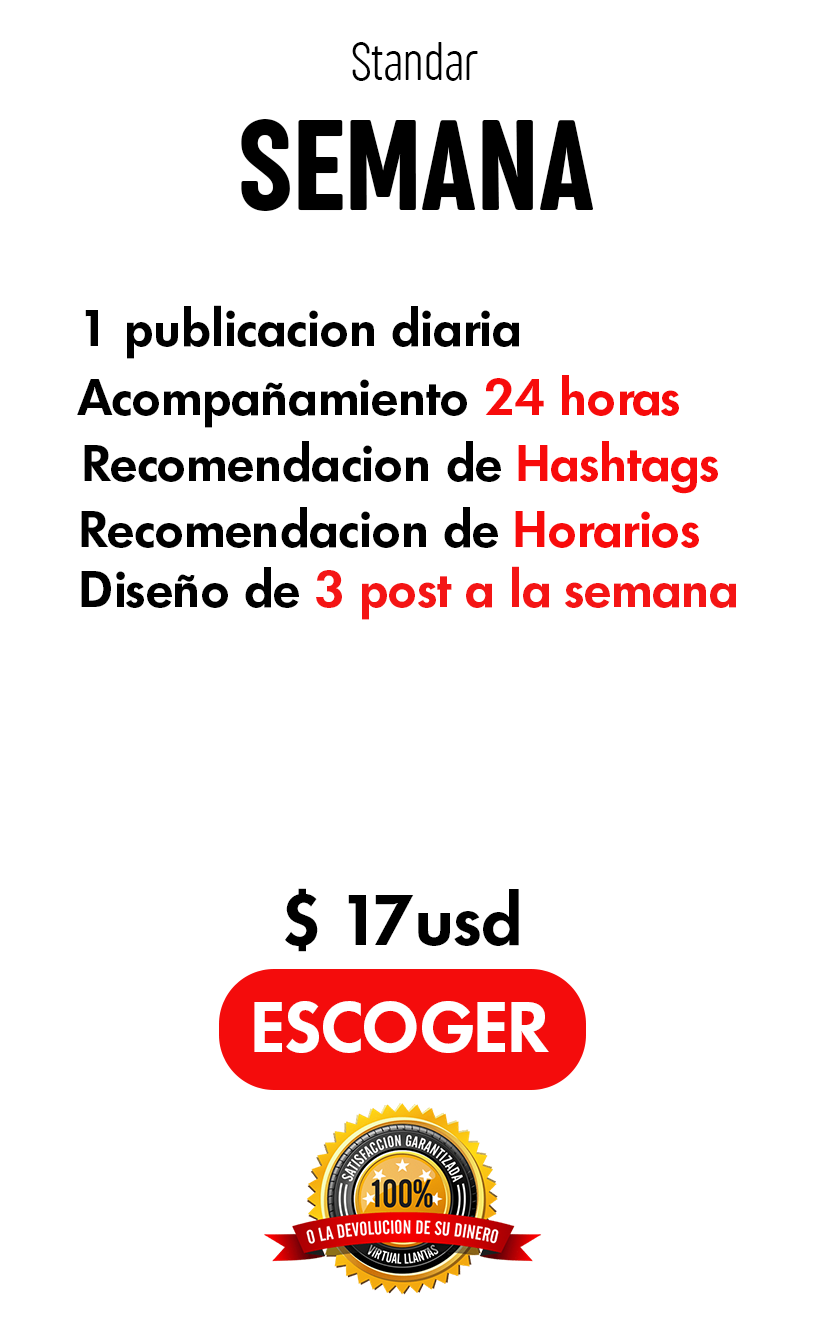
<style>
.page{position:relative;width:830px;height:1328px;background:#ffffff}
.page>*{position:absolute;margin:0}
.t1{font:55.6px "SugoProClassicTrial-ExtraLight";letter-spacing:0.004em;color:#000000}
.t2{font:133.2px "SugoProClassicTrial-Regular";letter-spacing:0.004em;color:#000000}
.t3{font:49.3px "Limerick-DemiBold";letter-spacing:0.004em;color:#000000}
.t4{font:49.3px "Limerick-DemiBold";letter-spacing:0.004em;color:#f70b0b}
.t5{font:49.3px "Limerick-DemiBold";letter-spacing:0.004em;color:#f80b0b}
.t6{font:49.3px "Limerick-DemiBold";letter-spacing:0.004em;color:#f41515}
.t7{font:68.7px "Limerick-DemiBold";letter-spacing:0.004em;color:#000000}
.t8{font:69.4px "Limerick-DemiBold";letter-spacing:0.004em;color:#ffffff}
</style>
<div class="page">
<p class="t1" style="left:352px;top:42px;width:126px;height:39px">Standar</p>
<p class="t2" style="left:241px;top:119px;width:353px;height:92px">SEMANA</p>
<p class="t3" style="left:85px;top:305px;width:434px;height:54px">1 publicacion diaria</p>
<p class="t3" style="left:77px;top:375px;width:602px;height:53px">Acompañamiento <span class="t4">24 horas</span></p>
<p class="t3" style="left:84px;top:441px;width:634px;height:53px">Recomendacion de <span class="t5">Hashtags</span></p>
<p class="t3" style="left:81px;top:507px;width:618px;height:41px">Recomendacion de <span class="t5">Horarios</span></p>
<p class="t6" style="left:81px;top:566px;width:655px;height:54px"><span class="t3">Diseño de </span>3 post a la semana</p>
<p class="t7" style="left:285px;top:888px;width:234px;height:64px">$ 17usd</p>
<p class="t8" style="left:254px;top:1001px;width:295px;height:52px">ESCOGER</p>
</div>
